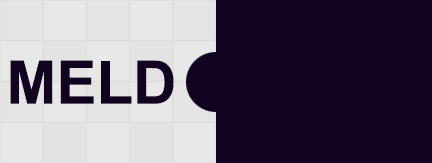
<style>
.page{position:relative;width:432px;height:163px;background:#120321}
.page>*{position:absolute;margin:0}
.t1{font:60px "Arial-BoldMT";color:#120321}
</style>
<div class="page">
<p class="t1" style="left:10px;top:60px;width:164px;height:44px">MELD</p>
</div>
